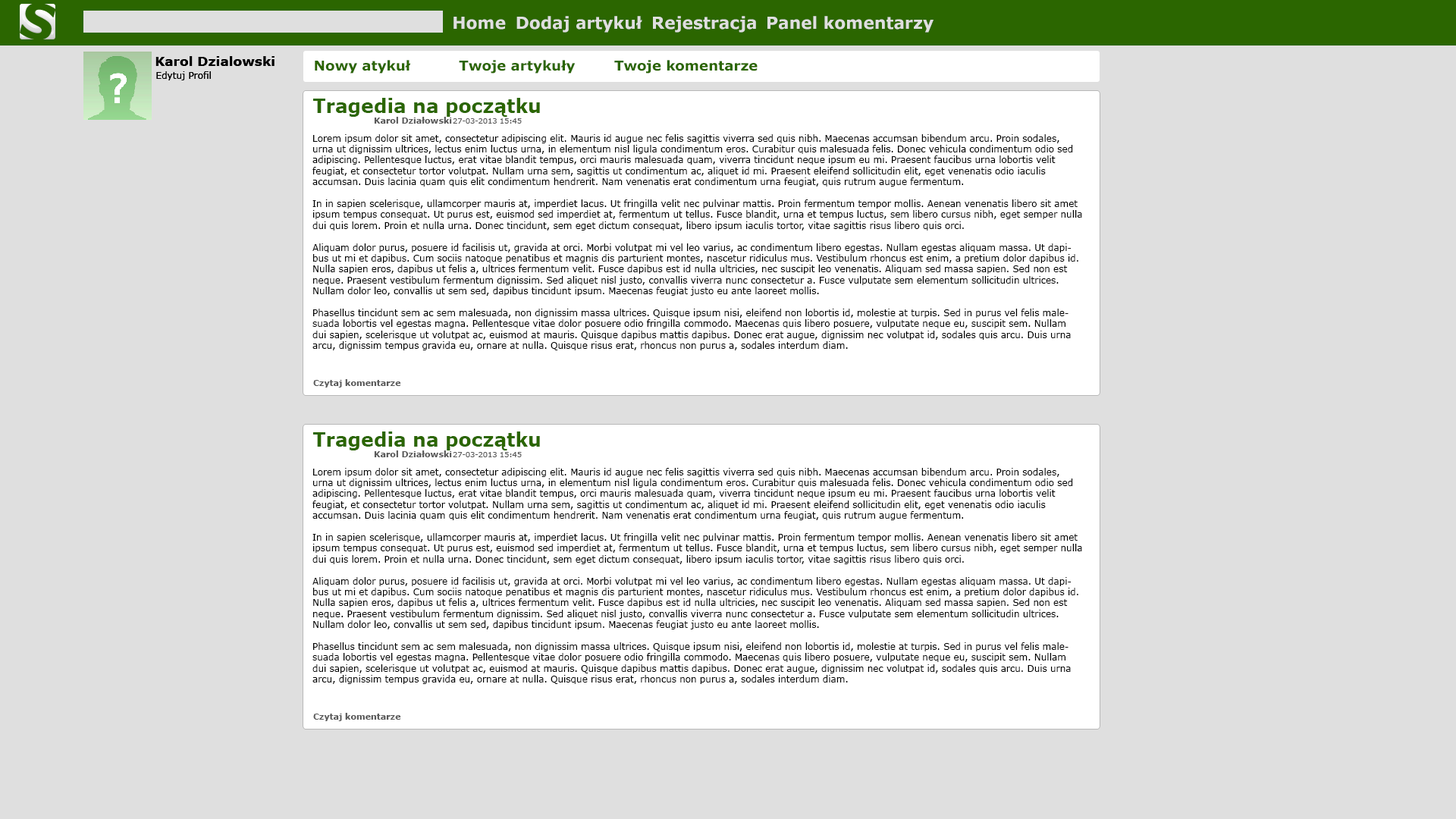
<style>
.page{position:relative;width:1456px;height:819px;background:#dfdfdf}
.page>*{position:absolute;margin:0}
.t1{font:16.7px "Verdana-Bold";color:#dfdfdf}
.t2{font:12.9px "Verdana-Bold";color:#000000}
.t3{font:13.6px "Verdana-Bold";color:#2b6600}
.t4{font:9.1px "Verdana";color:#000000}
.t5{font:18.9px "Verdana-Bold";color:#2b6600}
.t6{font:8.3px "Verdana-Bold";color:#595959}
.t7{font:7.1px "Verdana";color:#595959;scale:1.03 1}
</style>
<div class="page">
<p class="t1" style="left:453px;top:17px;width:53px;height:13px">Home</p>
<p class="t1" style="left:516px;top:16px;width:126px;height:17px">Dodaj artykuł</p>
<p class="t1" style="left:653px;top:16px;width:103px;height:17px">Rejestracja</p>
<p class="t1" style="left:767px;top:16px;width:166px;height:17px">Panel komentarzy</p>
<p class="t2" style="left:155px;top:56px;width:120px;height:10px">Karol Dzialowski</p>
<p class="t2" style="left:155px;top:56px;width:120px;height:10px">Karol Dzialowski</p>
<p class="t3" style="left:315px;top:60px;width:95px;height:14px">Nowy atykuł</p>
<p class="t3" style="left:459px;top:60px;width:117px;height:14px">Twoje artykuły</p>
<p class="t3" style="left:614px;top:60px;width:144px;height:14px">Twoje komentarze</p>
<p class="t4" style="left:156px;top:71px;width:55px;height:9px">Edytuj Profil</p>
<p class="t4" style="left:156px;top:71px;width:55px;height:9px">Edytuj Profil</p>
<p class="t5" style="left:313px;top:98px;width:227px;height:19px">Tragedia na początku</p>
<p class="t6" style="left:374px;top:117px;width:78px;height:7px">Karol Działowski</p>
<p class="t7" style="left:453px;top:118px;width:69px;height:6px">27-03-2013 15:45</p>
<p class="t4" style="left:312px;top:134px;width:770px;height:216px">Lorem ipsum dolor sit amet, consectetur adipiscing elit. Mauris id augue nec felis sagittis viverra sed quis nibh. Maecenas accumsan bibendum arcu. Proin sodales, urna ut dignissim ultrices, lectus enim luctus urna, in elementum nisl ligula condimentum eros. Curabitur quis malesuada felis. Donec vehicula condimentum odio sed adipiscing. Pellentesque luctus, erat vitae blandit tempus, orci mauris malesuada quam, viverra tincidunt neque ipsum eu mi. Praesent faucibus urna lobortis velit feugiat, et consectetur tortor volutpat. Nullam urna sem, sagittis ut condimentum ac, aliquet id mi. Praesent eleifend sollicitudin elit, eget venenatis odio iaculis accumsan. Duis lacinia quam quis elit condimentum hendrerit. Nam venenatis erat condimentum urna feugiat, quis rutrum augue fermentum.<br><br>In in sapien scelerisque, ullamcorper mauris at, imperdiet lacus. Ut fringilla velit nec pulvinar mattis. Proin fermentum tempor mollis. Aenean venenatis libero sit amet ipsum tempus consequat. Ut purus est, euismod sed imperdiet at, fermentum ut tellus. Fusce blandit, urna et tempus luctus, sem libero cursus nibh, eget semper nulla dui quis lorem. Proin et nulla urna. Donec tincidunt, sem eget dictum consequat, libero ipsum iaculis tortor, vitae sagittis risus libero quis orci.<br><br>Aliquam dolor purus, posuere id facilisis ut, gravida at orci. Morbi volutpat mi vel leo varius, ac condimentum libero egestas. Nullam egestas aliquam massa. Ut dapibus ut mi et dapibus. Cum sociis natoque penatibus et magnis dis parturient montes, nascetur ridiculus mus. Vestibulum rhoncus est enim, a pretium dolor dapibus id. Nulla sapien eros, dapibus ut felis a, ultrices fermentum velit. Fusce dapibus est id nulla ultricies, nec suscipit leo venenatis. Aliquam sed massa sapien. Sed non est neque. Praesent vestibulum fermentum dignissim. Sed aliquet nisl justo, convallis viverra nunc consectetur a. Fusce vulputate sem elementum sollicitudin ultrices. Nullam dolor leo, convallis ut sem sed, dapibus tincidunt ipsum. Maecenas feugiat justo eu ante laoreet mollis.<br><br>Phasellus tincidunt sem ac sem malesuada, non dignissim massa ultrices. Quisque ipsum nisi, eleifend non lobortis id, molestie at turpis. Sed in purus vel felis malesuada lobortis vel egestas magna. Pellentesque vitae dolor posuere odio fringilla commodo. Maecenas quis libero posuere, vulputate neque eu, suscipit sem. Nullam dui sapien, scelerisque ut volutpat ac, euismod at mauris. Quisque dapibus mattis dapibus. Donec erat augue, dignissim nec volutpat id, sodales quis arcu. Duis urna arcu, dignissim tempus gravida eu, ornare at nulla. Quisque risus erat, rhoncus non purus a, sodales interdum diam.<br><br>Sed hendrerit varius enim, sed vestibulum mi dapibus quis. In hac habitasse platea dictumst. Donec sed mi arcu. Nam lacinia dictum libero ut lacinia. Praesent lacinia consequat nisi, et lobortis ante fringilla nec. Integer luctus, ante id aliquet euismod, purus risus interdum mi, non feugiat nisl tellus vitae velit. Nulla facilisi. Quisque ullamcorper eu erat eu bibendum. Integer dignissim iaculis ligula eu fringilla. Praesent nec libero ullamcorper, rhoncus justo quis, interdum arcu. Donec sollicitudin dolor vitae interdum elementum.</p>
<p class="t6" style="left:313px;top:379px;width:88px;height:9px">Czytaj komentarze</p>
<p class="t5" style="left:313px;top:431px;width:227px;height:19px">Tragedia na początku</p>
<p class="t6" style="left:374px;top:450px;width:78px;height:7px">Karol Działowski</p>
<p class="t7" style="left:453px;top:452px;width:69px;height:5px">27-03-2013 15:45</p>
<p class="t4" style="left:312px;top:468px;width:770px;height:216px">Lorem ipsum dolor sit amet, consectetur adipiscing elit. Mauris id augue nec felis sagittis viverra sed quis nibh. Maecenas accumsan bibendum arcu. Proin sodales, urna ut dignissim ultrices, lectus enim luctus urna, in elementum nisl ligula condimentum eros. Curabitur quis malesuada felis. Donec vehicula condimentum odio sed adipiscing. Pellentesque luctus, erat vitae blandit tempus, orci mauris malesuada quam, viverra tincidunt neque ipsum eu mi. Praesent faucibus urna lobortis velit feugiat, et consectetur tortor volutpat. Nullam urna sem, sagittis ut condimentum ac, aliquet id mi. Praesent eleifend sollicitudin elit, eget venenatis odio iaculis accumsan. Duis lacinia quam quis elit condimentum hendrerit. Nam venenatis erat condimentum urna feugiat, quis rutrum augue fermentum.<br><br>In in sapien scelerisque, ullamcorper mauris at, imperdiet lacus. Ut fringilla velit nec pulvinar mattis. Proin fermentum tempor mollis. Aenean venenatis libero sit amet ipsum tempus consequat. Ut purus est, euismod sed imperdiet at, fermentum ut tellus. Fusce blandit, urna et tempus luctus, sem libero cursus nibh, eget semper nulla dui quis lorem. Proin et nulla urna. Donec tincidunt, sem eget dictum consequat, libero ipsum iaculis tortor, vitae sagittis risus libero quis orci.<br><br>Aliquam dolor purus, posuere id facilisis ut, gravida at orci. Morbi volutpat mi vel leo varius, ac condimentum libero egestas. Nullam egestas aliquam massa. Ut dapibus ut mi et dapibus. Cum sociis natoque penatibus et magnis dis parturient montes, nascetur ridiculus mus. Vestibulum rhoncus est enim, a pretium dolor dapibus id. Nulla sapien eros, dapibus ut felis a, ultrices fermentum velit. Fusce dapibus est id nulla ultricies, nec suscipit leo venenatis. Aliquam sed massa sapien. Sed non est neque. Praesent vestibulum fermentum dignissim. Sed aliquet nisl justo, convallis viverra nunc consectetur a. Fusce vulputate sem elementum sollicitudin ultrices. Nullam dolor leo, convallis ut sem sed, dapibus tincidunt ipsum. Maecenas feugiat justo eu ante laoreet mollis.<br><br>Phasellus tincidunt sem ac sem malesuada, non dignissim massa ultrices. Quisque ipsum nisi, eleifend non lobortis id, molestie at turpis. Sed in purus vel felis malesuada lobortis vel egestas magna. Pellentesque vitae dolor posuere odio fringilla commodo. Maecenas quis libero posuere, vulputate neque eu, suscipit sem. Nullam dui sapien, scelerisque ut volutpat ac, euismod at mauris. Quisque dapibus mattis dapibus. Donec erat augue, dignissim nec volutpat id, sodales quis arcu. Duis urna arcu, dignissim tempus gravida eu, ornare at nulla. Quisque risus erat, rhoncus non purus a, sodales interdum diam.<br><br>Sed hendrerit varius enim, sed vestibulum mi dapibus quis. In hac habitasse platea dictumst. Donec sed mi arcu. Nam lacinia dictum libero ut lacinia. Praesent lacinia consequat nisi, et lobortis ante fringilla nec. Integer luctus, ante id aliquet euismod, purus risus interdum mi, non feugiat nisl tellus vitae velit. Nulla facilisi. Quisque ullamcorper eu erat eu bibendum. Integer dignissim iaculis ligula eu fringilla. Praesent nec libero ullamcorper, rhoncus justo quis, interdum arcu. Donec sollicitudin dolor vitae interdum elementum.</p>
<p class="t6" style="left:313px;top:713px;width:88px;height:8px">Czytaj komentarze</p>
</div>
